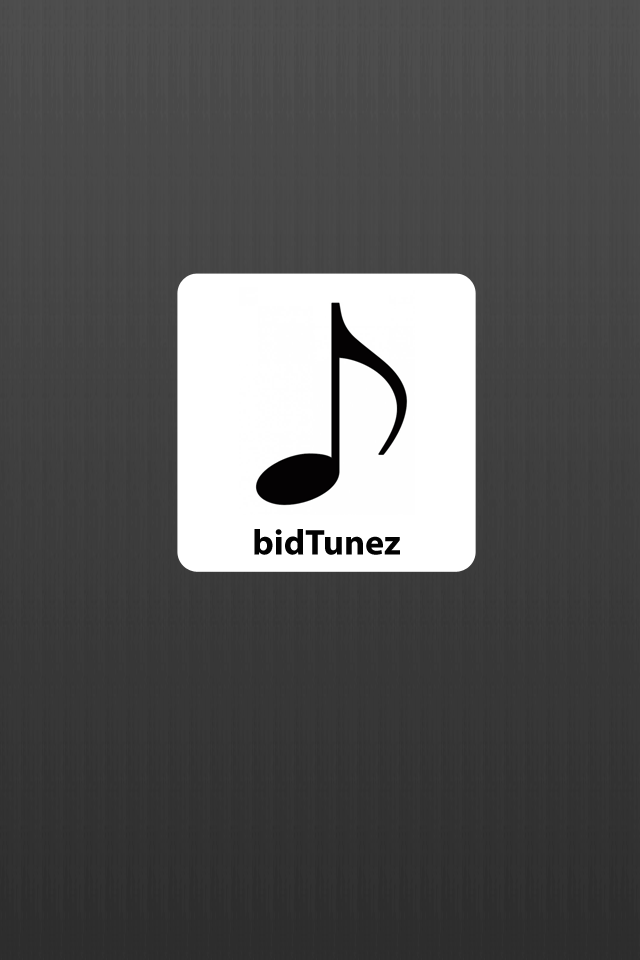
<style>
.page{position:relative;width:640px;height:960px}
.page>*{position:absolute;margin:0}
.t1{font:36px "MyriadPro-Bold";color:#020202}
</style>
<div class="page">
<p class="t1" style="left:254px;top:529px;width:146px;height:26px">bidTunez</p>
</div>
